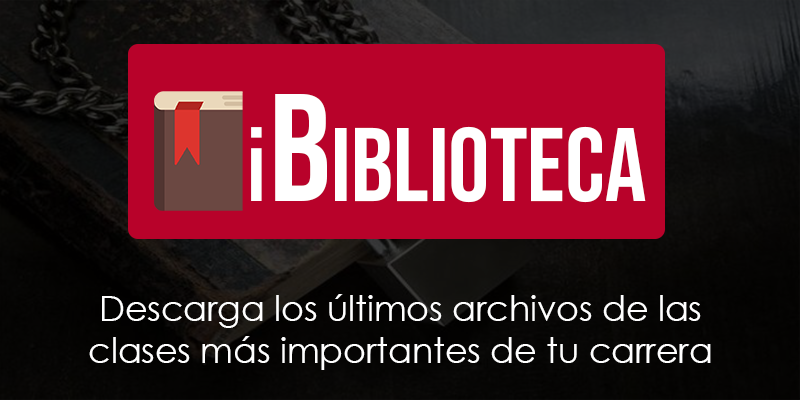
<style>
.page{position:relative;width:800px;height:400px;background:#b8022a}
.page>*{position:absolute;margin:0}
.t1{font:103.8px "BebasNeue-Regular";color:#ffffff}
.t2{font:103.8px "Bahnschrift";color:#ffffff}
.t3{font:153.1px "BebasNeue-Regular";color:#ffffff}
.t4{font:34.7px "CenturyGothic";color:#ffffff}
</style>
<div class="page">
<p class="t1" style="left:251px;top:94px;width:395px;height:109px"><span class="t2">i</span><span class="t3">b</span>ibLIOTECA</p>
<p class="t4" style="left:89px;top:294px;width:622px;height:76px;text-align:center">Descarga los últimos archivos de las<br>clases más importantes de tu carrera</p>
</div>
